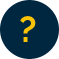
<style>
.page{position:relative;width:59px;height:59px;background:#002740}
.page>*{position:absolute;margin:0}
.t1{font:36px "Raleway-Bold";color:#fcc303}
</style>
<div class="page">
<p class="t1" style="left:20px;top:16px;width:16px;height:26px">?</p>
</div>
